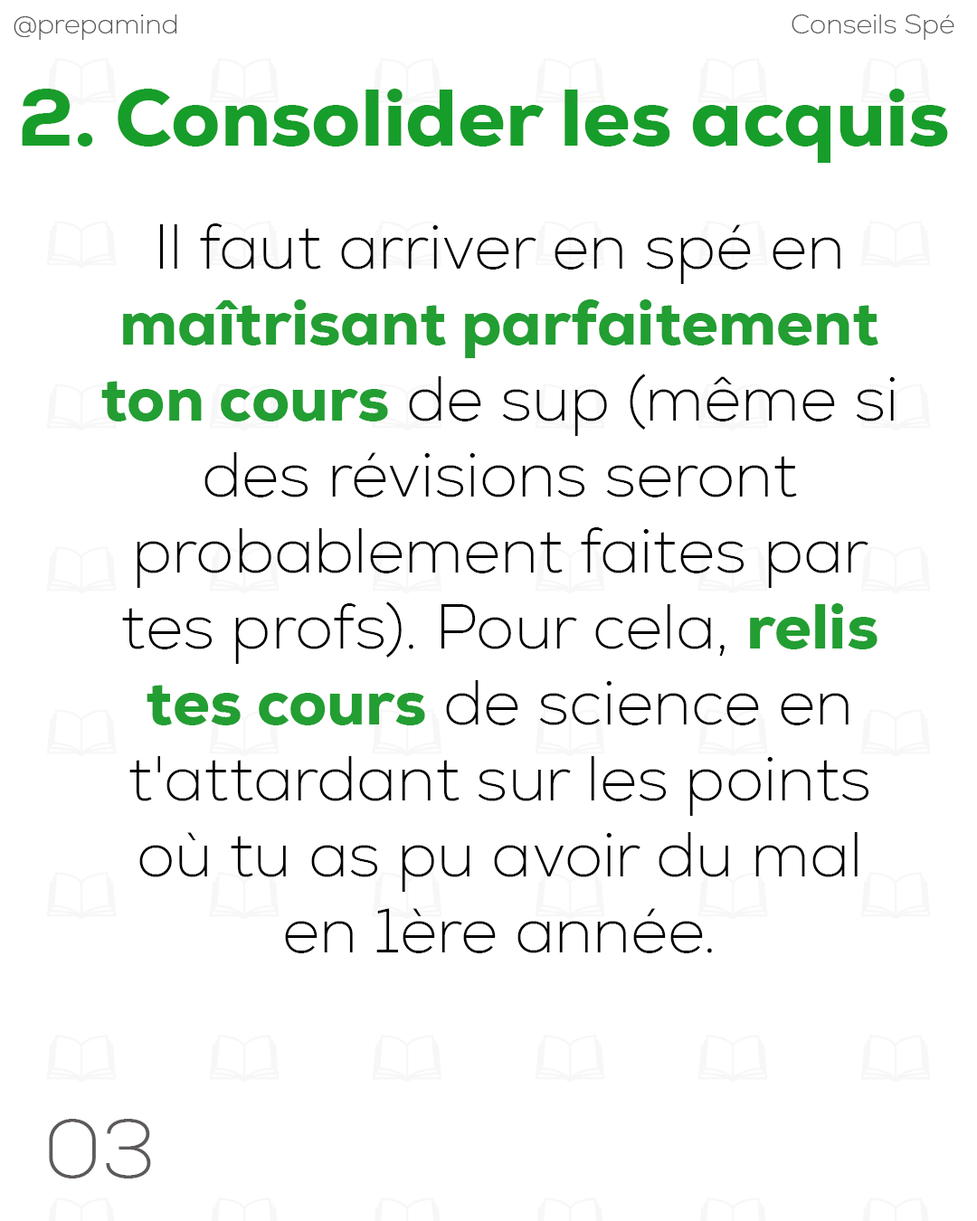
<style>
.page{position:relative;width:977px;height:1221px;background:#ffffff}
.page>*{position:absolute;margin:0}
.t1{font:27.1px "Nexa-ExtraLight";color:#5e5a5a}
.t2{font:81.2px "Nexa-Heavy";color:#179d2a}
.t3{font:63.3px "Nexa-ExtraLight";color:#000000}
.t4{font:63.3px "Nexa-Heavy";color:#229e32}
.t5{font:81.7px "Nexa-ExtraLight";color:#5e5a5a}
</style>
<div class="page">
<p class="t1" style="left:14px;top:14px;width:163px;height:26px">@prepamind</p>
<p class="t1" style="left:791px;top:14px;width:163px;height:26px">Conseils Spé</p>
<p class="t2" style="left:22px;top:89px;width:926px;height:74px">2. Consolider les acquis de sup</p>
<p class="t3" style="left:101px;top:223px;width:793px;height:730px;text-align:center">Il faut arriver en spé en <span class="t4">maîtrisant parfaitement ton cours</span> de sup (même si des révisions seront probablement faites par tes profs). Pour cela, <span class="t4">relis tes cours</span> de science en t'attardant sur les points où tu as pu avoir du mal en 1ère année.</p>
<p class="t5" style="left:49px;top:1119px;width:102px;height:59px">03</p>
</div>
